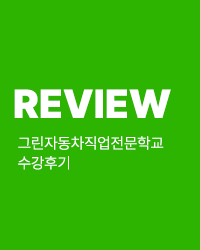
<style>
.page{position:relative;width:200px;height:250px;background:#2db400}
.page>*{position:absolute;margin:0}
.t1{font:40px "Pretendard-Black";color:#ffffff}
.t2{font:15.4px/19.8px "Pretendard-Light";color:#ffffff}
</style>
<div class="page">
<p class="t1" style="left:14px;top:89px;width:157px;height:29px">REVIEW</p>
<p class="t2" style="left:18px;top:136px;width:146px;height:34px">그린자동차직업전문학교<br>수강후기</p>
</div>
